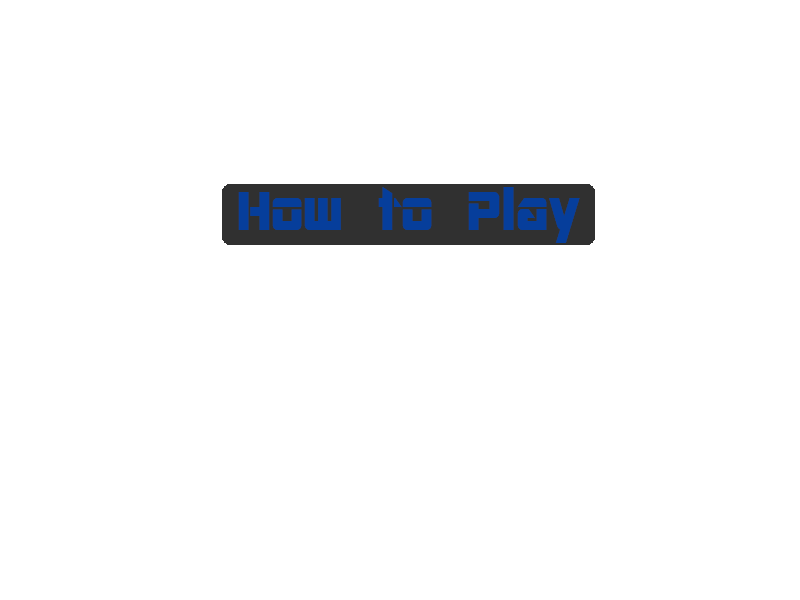
<style>
.page{position:relative;width:800px;height:600px;background:#ffffff}
.page>*{position:absolute;margin:0}
.t1{font:60px "ARDESTINE";color:#063e9b}
</style>
<div class="page">
<p class="t1" style="left:238px;top:187px;width:342px;height:56px">How to Play</p>
</div>
